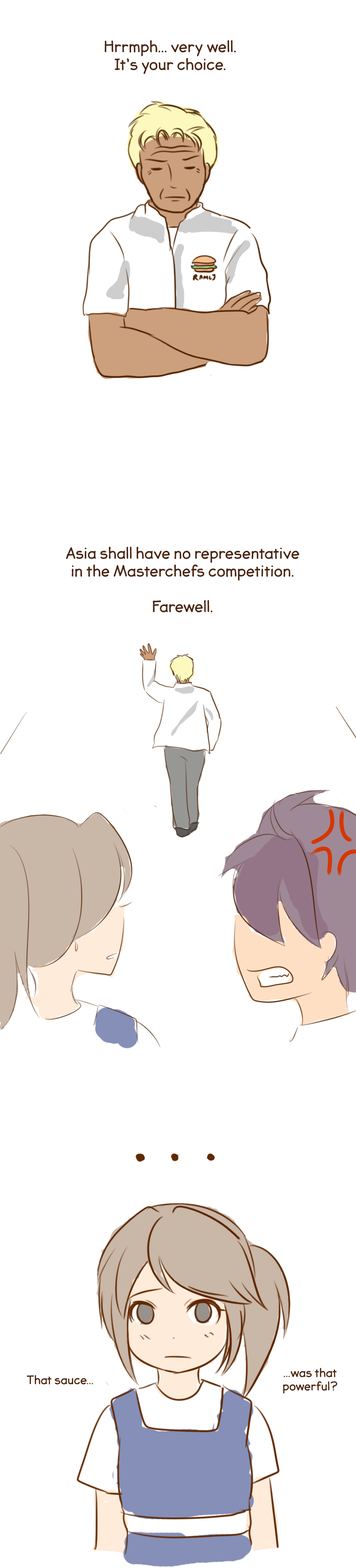
<style>
.page{position:relative;width:356px;height:1568px;background:#ffffff}
.page>*{position:absolute;margin:0}
.t1{font:14.8px "JollyGoodSans-Basic";color:#4b250e}
.t2{font:11.2px "JollyGoodSans-Basic";color:#4b250e}
</style>
<div class="page">
<p class="t1" style="left:104px;top:40px;width:132px;height:34px;text-align:center">Hrrmph... very well.<br>It’s your choice.</p>
<p class="t1" style="left:66px;top:546px;width:233px;height:67px;text-align:center">Asia shall have no representative<br>in the Masterchefs competition.<br><br>Farewell.</p>
<p class="t2" style="left:283px;top:1368px;width:54px;height:26px;text-align:center">...was that<br>powerful?</p>
<p class="t2" style="left:27px;top:1375px;width:66px;height:10px">That sauce...</p>
</div>
